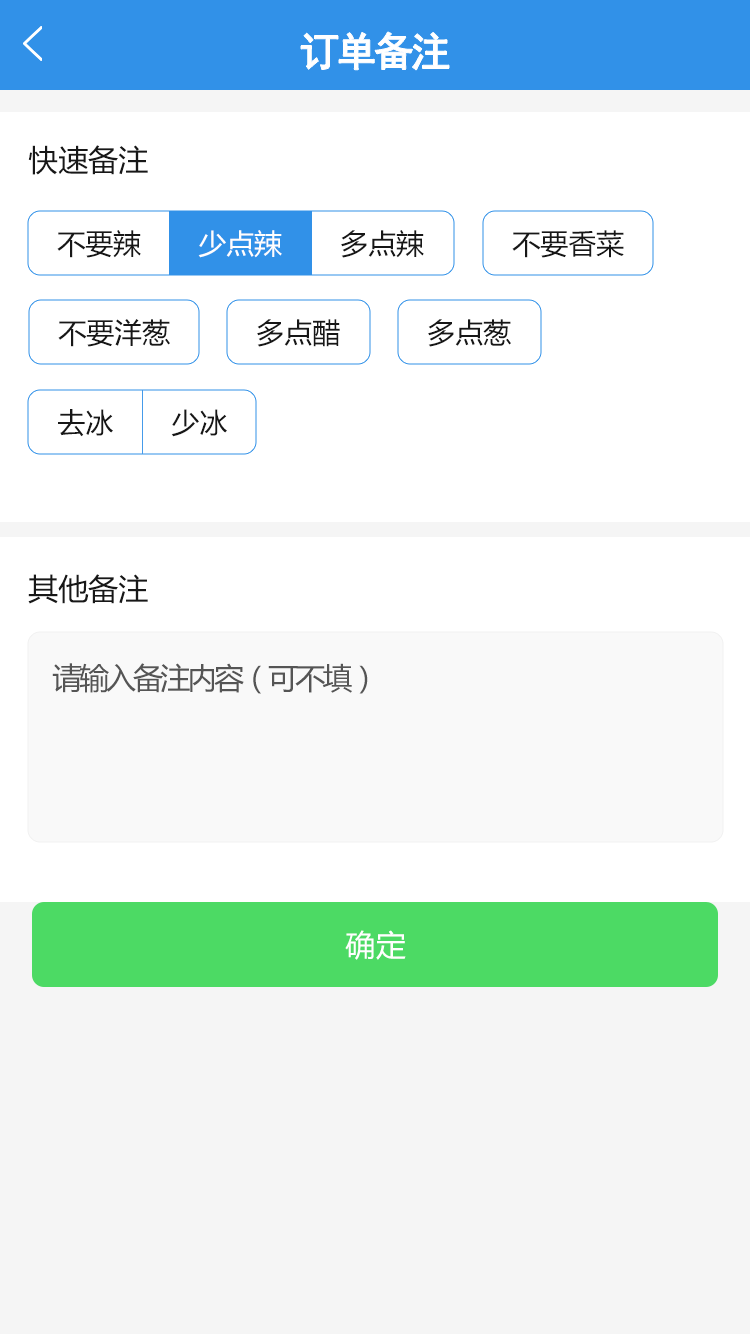
<style>
.page{position:relative;width:750px;height:1334px;background:#ffffff}
.page>*{position:absolute;margin:0}
.t1{font:40px "SimHei";letter-spacing:-0.1em;color:#ffffff;font-weight:bold}
.t2{font:30px "MicrosoftYaHei";color:#171717}
.t3{font:28px "MicrosoftYaHei";color:#171717}
.t4{font:28px "MicrosoftYaHei";color:#fefefe}
.t5{font:30px "MicrosoftYaHei";letter-spacing:-0.1em;color:#555555}
.t6{font:30px "MicrosoftYaHei";letter-spacing:0.025em;color:#ffffff}
</style>
<div class="page">
<p class="t1" style="left:301px;top:32px;width:148px;height:38px">订单备注</p>
<p class="t2" style="left:28px;top:145px;width:120px;height:30px">快速备注</p>
<p class="t3" style="left:57px;top:230px;width:84px;height:28px">不要辣</p>
<p class="t4" style="left:198px;top:230px;width:84px;height:28px">少点辣</p>
<p class="t3" style="left:341px;top:230px;width:83px;height:28px">多点辣</p>
<p class="t3" style="left:512px;top:230px;width:112px;height:28px">不要香菜</p>
<p class="t3" style="left:58px;top:319px;width:112px;height:28px">不要洋葱</p>
<p class="t3" style="left:257px;top:319px;width:83px;height:28px">多点醋</p>
<p class="t3" style="left:428px;top:319px;width:83px;height:28px">多点葱</p>
<p class="t3" style="left:58px;top:409px;width:55px;height:28px">去冰</p>
<p class="t3" style="left:171px;top:409px;width:56px;height:28px">少冰</p>
<p class="t2" style="left:28px;top:574px;width:120px;height:30px">其他备注</p>
<p class="t5" style="left:52px;top:663px;width:316px;height:31px">请输入备注内容（可不填）</p>
<p class="t6" style="left:345px;top:930px;width:61px;height:30px">确定</p>
</div>
